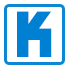
<style>
.page{position:relative;width:70px;height:70px;background:#ffffff}
.page>*{position:absolute;margin:0}
.t1{font:65px "Gabato";color:#0080d2}
</style>
<div class="page">
<p class="t1" style="left:17px;top:11px;width:35px;height:46px">K</p>
</div>
